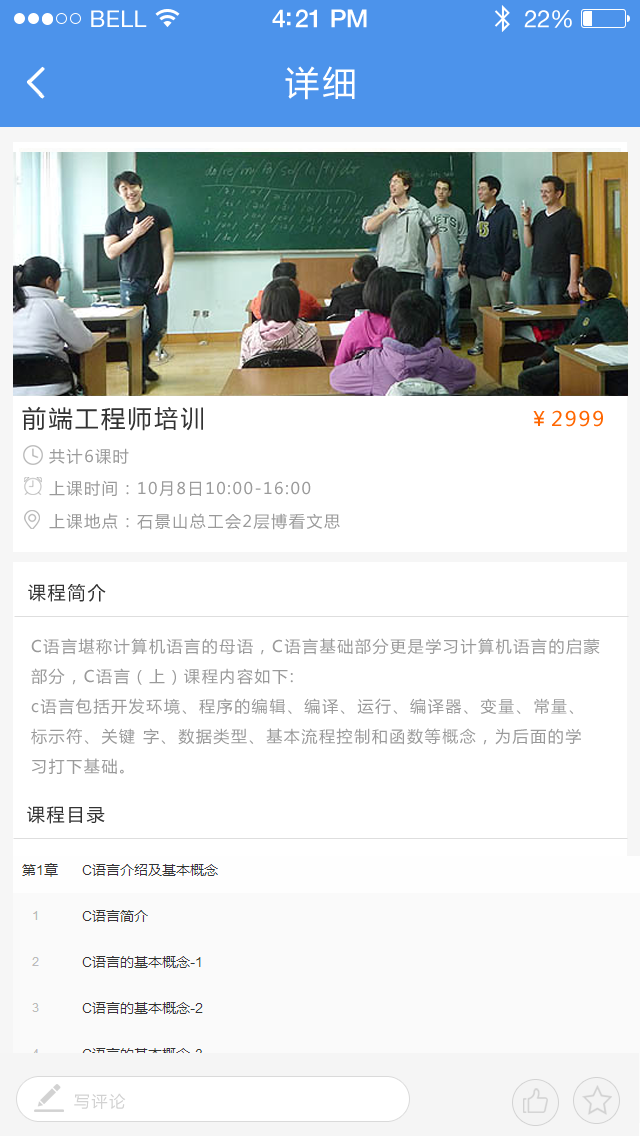
<style>
.page{position:relative;width:640px;height:1136px;background:#ffffff}
.page>*{position:absolute;margin:0}
.t1{font:23px "HelveticaNeue";letter-spacing:0.02em;color:#ffffff}
.t2{font:25px "HelveticaNeue-Medium";letter-spacing:-0.02em;color:#ffffff}
.t3{font:24px "HelveticaNeue";letter-spacing:-0.02em;color:#ffffff}
.t4{font:34px "MicrosoftYaHei";letter-spacing:0.1em;color:#ffffff}
.t5{font:24px "MicrosoftYaHei";letter-spacing:0.1em;color:#333333}
.t6{font:20px "MicrosoftYaHei";letter-spacing:0.1em;color:#ff6600}
.t7{font:16px "MicrosoftYaHei";letter-spacing:0.1em;color:#9a9a9a}
.t8{font:18px "MicrosoftYaHei";letter-spacing:0.1em;color:#333333}
.t9{font:16px/30px "MicrosoftYaHei";letter-spacing:0.1em;color:#9a9a9a}
.t10{font:16px "MicrosoftYaHei";letter-spacing:0.1em;color:#d2d2d2}
</style>
<div class="page">
<p class="t1" style="left:91px;top:10px;width:56px;height:17px">BELL</p>
<p class="t2" style="left:272px;top:9px;width:95px;height:19px">4:21 PM</p>
<p class="t3" style="left:524px;top:10px;width:48px;height:18px">22%</p>
<p class="t4" style="left:285px;top:66px;width:70px;height:34px">详细</p>
<p class="t5" style="left:22px;top:406px;width:181px;height:25px">前端工程师培训</p>
<p class="t6" style="left:533px;top:410px;width:70px;height:17px">￥2999</p>
<p class="t7" style="left:49px;top:448px;width:80px;height:16px">共计6课时</p>
<p class="t7" style="left:49px;top:480px;width:262px;height:17px">上课时间：10月8日10:00-16:00</p>
<p class="t7" style="left:49px;top:513px;width:291px;height:17px">上课地点：石景山总工会2层博看文思</p>
<p class="t8" style="left:28px;top:584px;width:78px;height:18px">课程简介</p>
<p class="t9" style="left:31px;top:638px;width:569px;height:136px">C语言堪称计算机语言的母语，C语言基础部分更是学习计算机语言的启蒙<br>部分，C语言（上）课程内容如下:<br>c语言包括开发环境、程序的编辑、编译、运行、编译器、变量、常量、<br>标示符、关键 字、数据类型、基本流程控制和函数等概念，为后面的学<br>习打下基础。</p>
<p class="t8" style="left:27px;top:806px;width:78px;height:18px">课程目录</p>
<p class="t10" style="left:74px;top:1093px;width:52px;height:16px">写评论</p>
</div>
